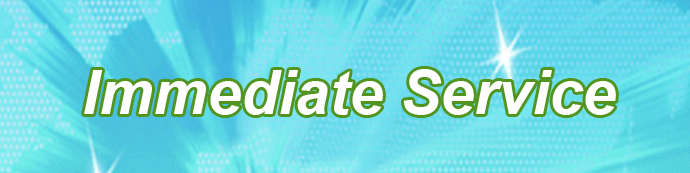
<style>
.page{position:relative;width:690px;height:173px}
.page>*{position:absolute;margin:0}
.t1{font:60.9px "Arial-BoldItalicMT";color:#ffffff}
</style>
<div class="page">
<p class="t1" style="left:84px;top:69px;width:532px;height:46px">Immediate Service</p>
</div>
